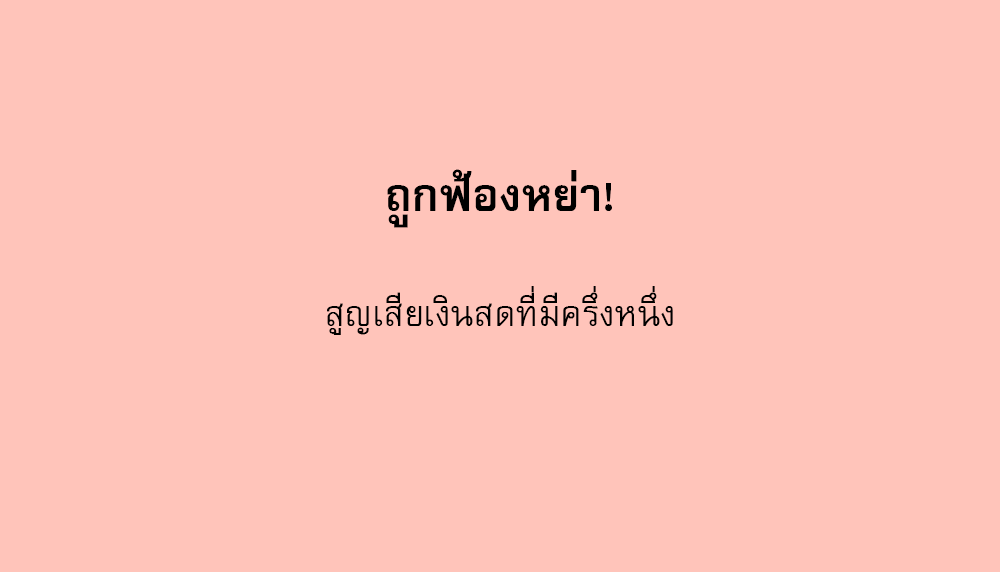
<style>
.page{position:relative;width:1000px;height:572px;background:#ffc4ba}
.page>*{position:absolute;margin:0}
.t1{font:64px "FreesiaUPCBold";color:#000000}
.t2{font:50px "FreesiaUPC";color:#000000}
</style>
<div class="page">
<p class="t1" style="left:387px;top:169px;width:225px;height:59px">ถูกฟ้องหย่า!</p>
<p class="t2" style="left:327px;top:286px;width:346px;height:49px">สูญเสียเงินสดที่มีครึ่งหนึ่ง</p>
</div>
